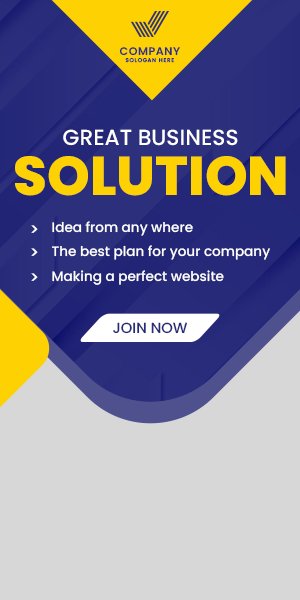
<style>
.page{position:relative;width:300px;height:600px;background:#d7d7d7}
.page>*{position:absolute;margin:0}
.t1{font:10.9px "Poppins-SemiBold";letter-spacing:0.05em;color:#2d307d}
.t2{font:5.4px "Poppins-Medium";letter-spacing:0.125em;color:#2d307d}
.t3{font:21.8px "Poppins-Medium";color:#ffffff}
.t4{font:54.5px "Poppins-ExtraBold";color:#fed202}
.t5{font:13.6px "Poppins-Medium";color:#ffffff}
.t6{font:16.3px "Poppins-Medium";color:#ffffff}
.t7{font:14.7px "Poppins-Medium";color:#282b7a}
</style>
<div class="page">
<p class="t1" style="left:119px;top:47px;width:61px;height:9px">COMPANY</p>
<p class="t2" style="left:125px;top:58px;width:49px;height:5px">SOLOGAN HERE</p>
<p class="t3" style="left:63px;top:129px;width:175px;height:17px">GREAT BUSINESS</p>
<p class="t4" style="left:15px;top:156px;width:271px;height:40px">SOLUTION</p>
<p class="t5" style="left:52px;top:221px;width:141px;height:15px">Idea from any where</p>
<p class="t6" style="left:31px;top:225px;width:7px;height:8px">&gt;</p>
<p class="t5" style="left:52px;top:245px;width:218px;height:15px">The best plan for your company</p>
<p class="t6" style="left:31px;top:248px;width:7px;height:8px">&gt;</p>
<p class="t5" style="left:52px;top:270px;width:172px;height:15px">Making a perfect website</p>
<p class="t6" style="left:31px;top:273px;width:7px;height:8px">&gt;</p>
<p class="t7" style="left:113px;top:322px;width:74px;height:12px">JOIN NOW</p>
</div>
